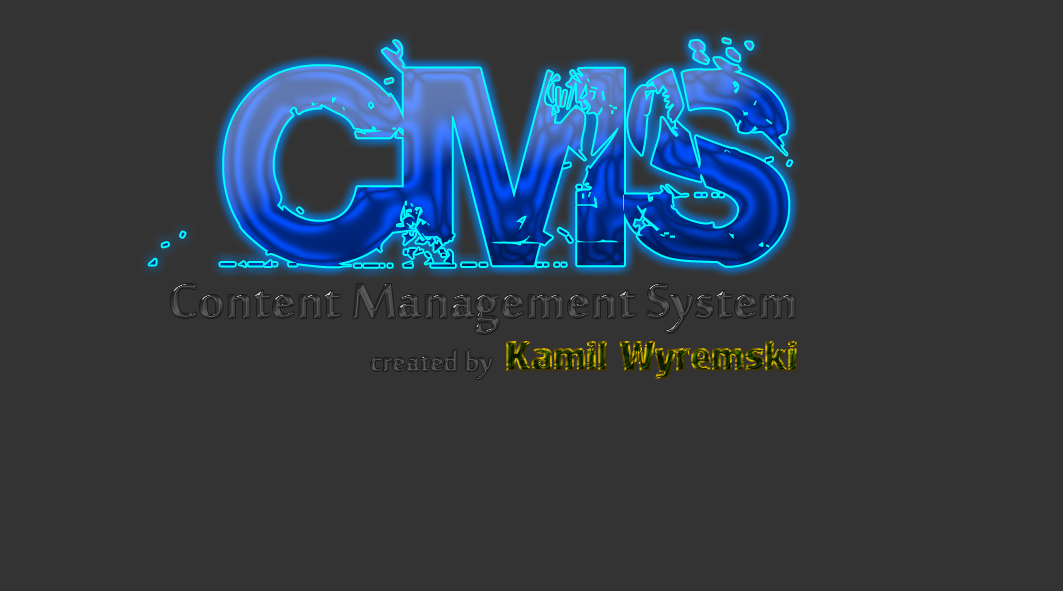
<style>
.page{position:relative;width:1063px;height:591px;background:#333333}
.page>*{position:absolute;margin:0}
.t1{font:250px "Base02"}
.t2{font:75px "MoolBoran"}
.t3{font:41.7px "Palent"}
.t4{font:41.7px "MoolBoran";color:#474747}
</style>
<div class="page">
<p class="t1" style="left:149px;top:39px;width:643px;height:228px">CMS</p>
<p class="t2" style="left:170px;top:284px;width:625px;height:50px">Content Management System</p>
<p class="t3" style="left:506px;top:341px;width:292px;height:38px">Kamil Wyremski</p>
<p class="t4" style="left:371px;top:350px;width:121px;height:29px">created by</p>
</div>
